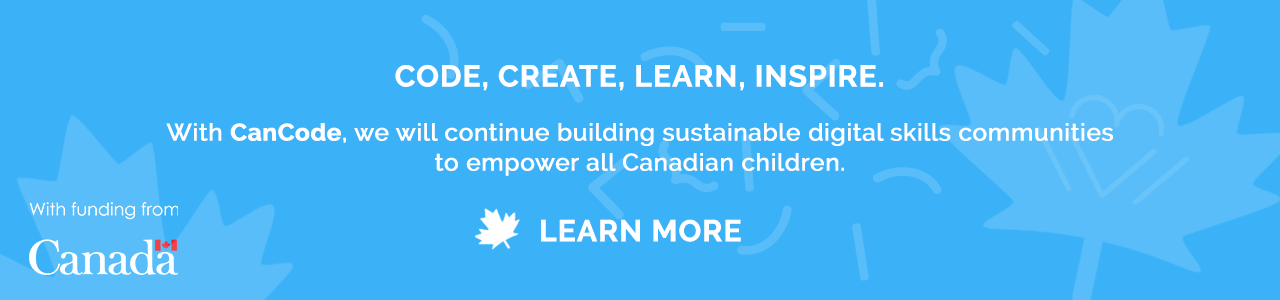
<style>
.page{position:relative;width:1280px;height:300px;background:#3bb2f7}
.page>*{position:absolute;margin:0}
.t1{font:23.9px/30px "Raleway-Medium";letter-spacing:0.01em;color:#ffffff;font-weight:bold}
.t2{font:29.9px/23.9px "Raleway-Bold";letter-spacing:0.01em;color:#ffffff;text-transform:uppercase;font-weight:bold}
.t3{font:23.9px/30px "Raleway-Bold";letter-spacing:0.01em;color:#ffffff;font-weight:bold}
.t4{font:30px "Raleway-Bold";letter-spacing:0.01em;color:#ffffff;text-transform:uppercase;font-weight:bold}
</style>
<div class="page">
<p class="t1" style="left:166px;top:64px;width:947px;height:112px;text-align:center"><span class="t2">Code, Create, Learn, Inspire.<br><br></span>With <span class="t3">CanCode</span>, we will continue building sustainable digital skills communities <br>to empower all Canadian children.</p>
<p class="t4" style="left:541px;top:219px;width:200px;height:23px">LEARN MORE</p>
</div>
